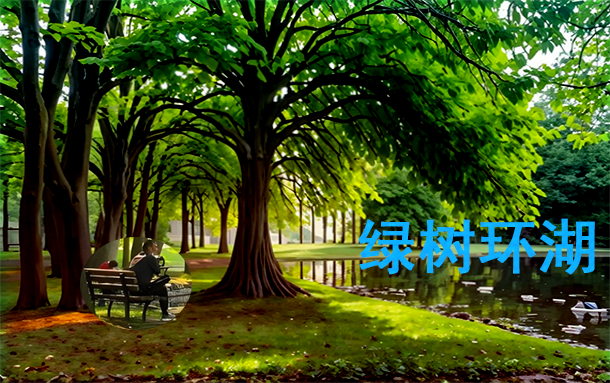
<style>
.page{position:relative;width:610px;height:383px}
.page>*{position:absolute;margin:0}
.t1{font:59px "SimHei";color:#02afff;font-weight:bold}
</style>
<div class="page">
<p class="t1" style="left:358px;top:218px;width:237px;height:57px">绿树环湖</p>
</div>
